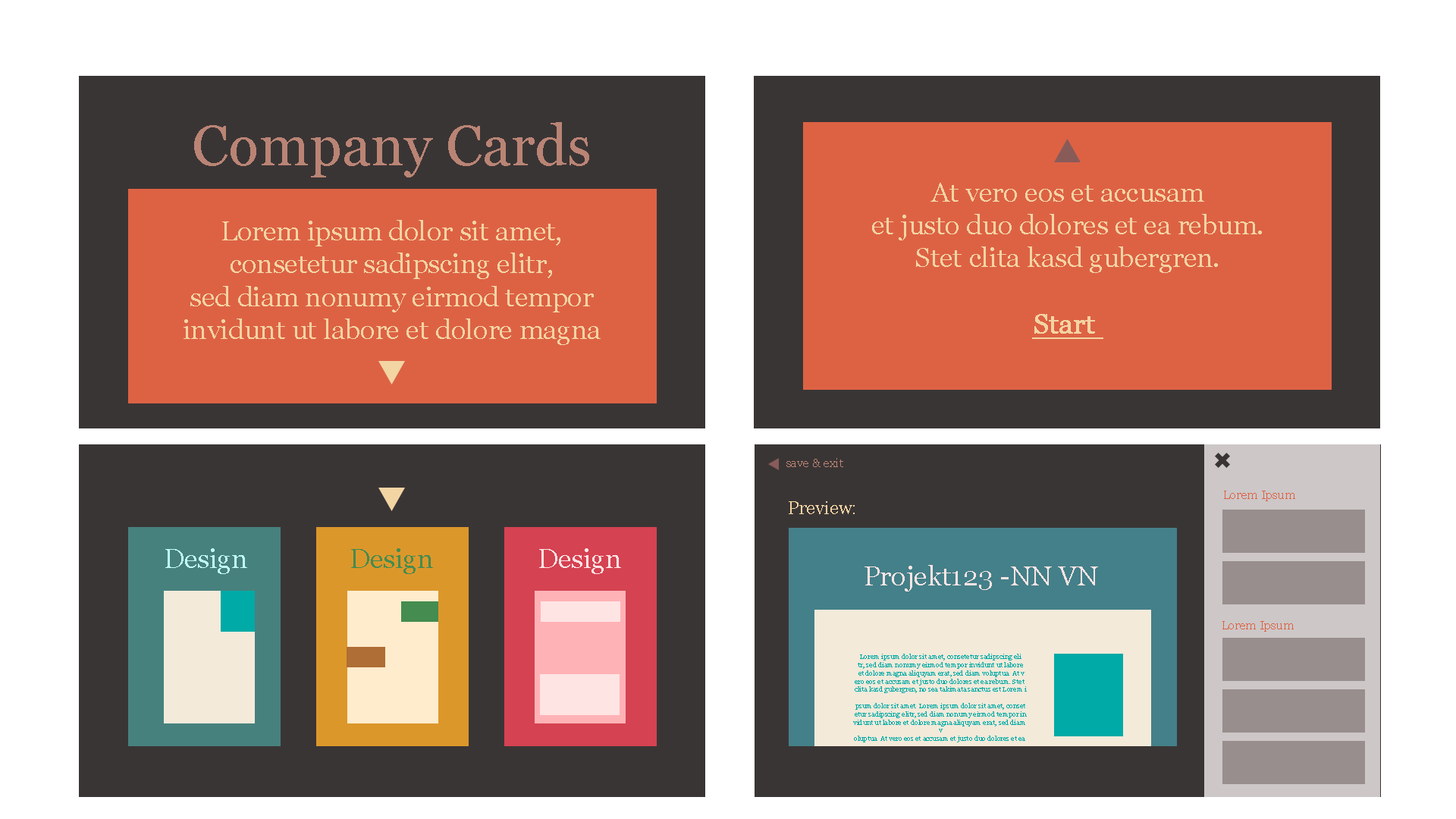
<style>
.page{position:relative;width:1456px;height:819px;background:#3a3535}
.page>*{position:absolute;margin:0}
.t1{font:56.9px "Georgia";color:#ba8475}
.t2{font:27.3px "Georgia";color:#f3d4a3}
.t3{font:27.3px "Georgia";color:#f3d4a3;font-weight:bold;text-decoration:underline}
.t4{font:12.1px "Georgia";color:#ba8475}
.t5{font:12.1px "Georgia";color:#dd6244}
.t6{font:18.2px "Georgia";color:#f3d4a3}
.t7{font:27.3px "Georgia";color:#c0fcf8}
.t8{font:27.3px "Georgia";color:#448c4f}
.t9{font:27.3px "Georgia";color:#ffe4e4}
.t10{font:6.8px "Georgia";color:#00aaa6}
</style>
<div class="page">
<p class="t1" style="left:194px;top:122px;width:395px;height:55px">Company Cards</p>
<p class="t2" style="left:872px;top:183px;width:390px;height:156px;text-align:center">At vero eos et accusam<br> et justo duo dolores et ea rebum. <br>Stet clita kasd gubergren.<br><br><span class="t3">Start</span></p>
<p class="t2" style="left:184px;top:220px;width:417px;height:125px;text-align:center">Lorem ipsum dolor sit amet, <br>consetetur sadipscing elitr, <br>sed diam nonumy eirmod tempor <br>invidunt ut labore et dolore magna</p>
<p class="t4" style="left:786px;top:458px;width:57px;height:9px">save &amp; exit</p>
<p class="t5" style="left:1224px;top:491px;width:71px;height:10px">Lorem Ipsum</p>
<p class="t6" style="left:789px;top:501px;width:66px;height:13px">Preview:</p>
<p class="t7" style="left:165px;top:548px;width:82px;height:26px">Design</p>
<p class="t8" style="left:351px;top:548px;width:82px;height:26px">Design</p>
<p class="t9" style="left:539px;top:548px;width:82px;height:26px">Design</p>
<p class="t9" style="left:864px;top:565px;width:234px;height:26px">Projekt123 -NN VN</p>
<p class="t5" style="left:1222px;top:621px;width:72px;height:11px">Lorem Ipsum</p>
<p class="t10" style="left:853px;top:654px;width:174px;height:88px;text-align:center">Lorem ipsum dolor sit amet, consetetur sadipscing eli<br>tr, sed diam nonumy eirmod tempor invidunt ut labore<br> et dolore magna aliquyam erat, sed diam voluptua. At v<br>ero eos et accusam et justo duo dolores et ea rebum. Stet <br>clita kasd gubergren, no sea takimata sanctus est Lorem i<br><br>psum dolor sit amet. Lorem ipsum dolor sit amet, conset<br>etur sadipscing elitr, sed diam nonumy eirmod tempor in<br>vidunt ut labore et dolore magna aliquyam erat, sed diam <br>v<br>oluptua. At vero eos et accusam et justo duo dolores et ea</p>
</div>
